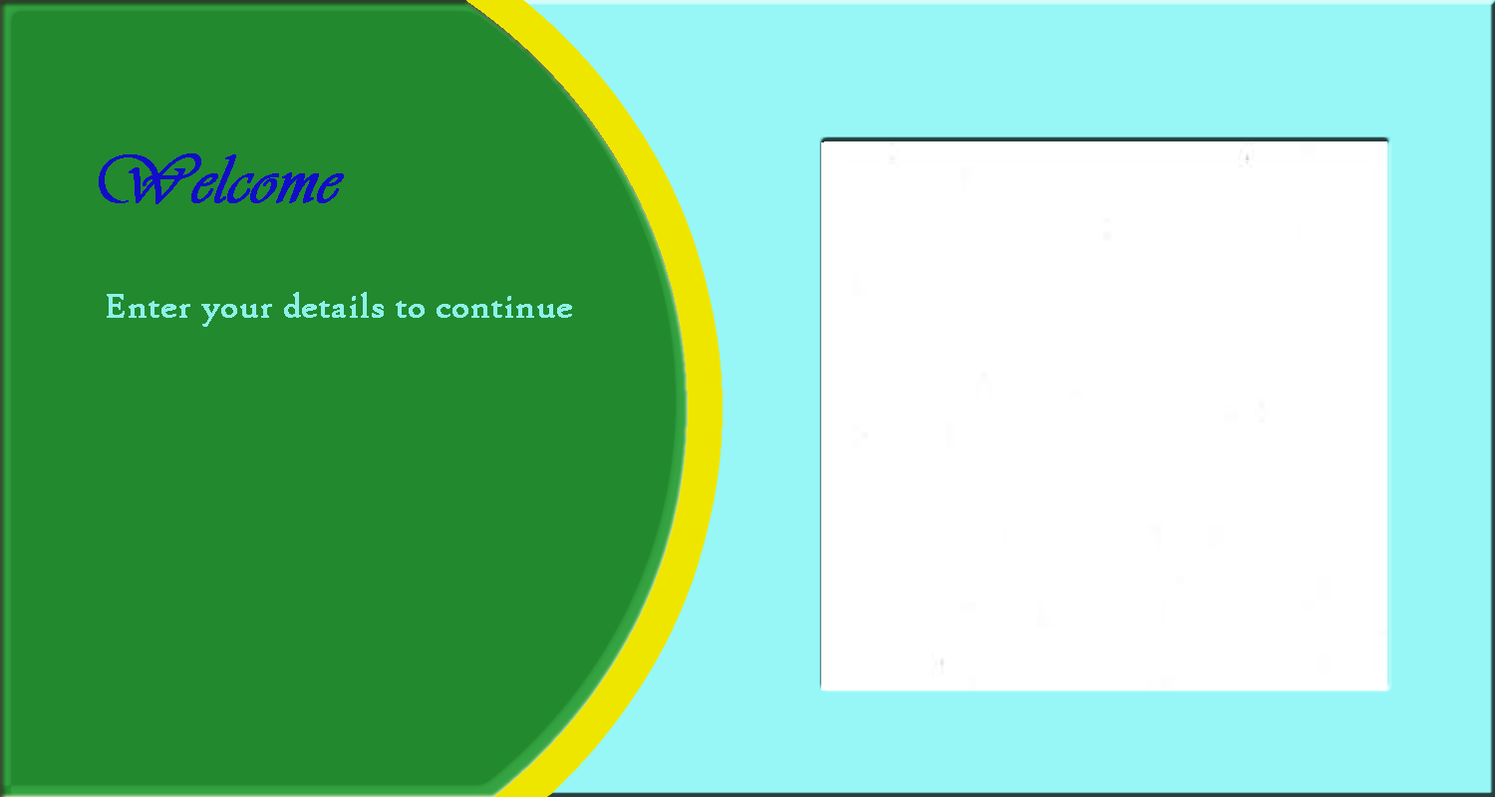
<style>
.page{position:relative;width:1495px;height:797px;background:#22892f}
.page>*{position:absolute;margin:0}
.t1{font:71.8px "Vivaldii";color:#120dc9;font-weight:bold}
.t2{font:35.9px "HighTowerText-Reg";color:#8df1e9;font-weight:bold}
</style>
<div class="page">
<p class="t1" style="left:99px;top:154px;width:245px;height:50px">Welcome</p>
<p class="t2" style="left:107px;top:292px;width:465px;height:35px">Enter your details to continue</p>
</div>
